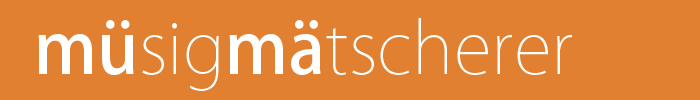
<style>
.page{position:relative;width:700px;height:100px;background:#e08030}
.page>*{position:absolute;margin:0}
.t1{font:70px "KozGoPro-ExtraLight";color:#ffffff}
.t2{font:70px "KozGoPro-Medium";color:#ffffff}
</style>
<div class="page">
<p class="t1" style="left:38px;top:18px;width:534px;height:73px"><span class="t2">mü</span>sig<span class="t2">mä</span>tscherer</p>
</div>
